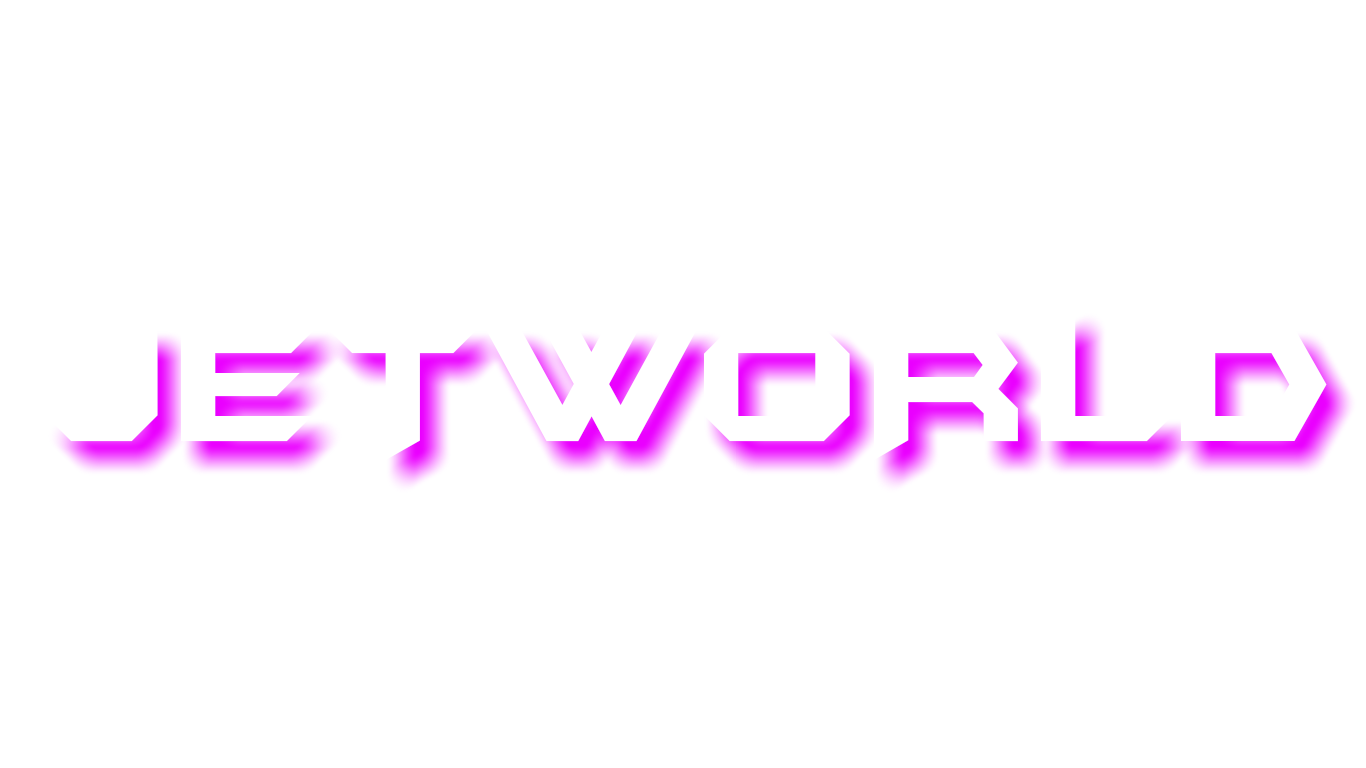
<style>
.page{position:relative;width:1366px;height:768px;background:#ffffff}
.page>*{position:absolute;margin:0}
.t1{font:191.7px "BatmanForeverAlternate";color:#ffffff}
</style>
<div class="page">
<p class="t1" style="left:46px;top:308px;width:1281px;height:152px">JETWORLD</p>
</div>
